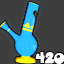
<style>
.page{position:relative;width:64px;height:64px;background:#3e3e3e}
.page>*{position:absolute;margin:0}
.t1{font:12px "akaDylanPlain";color:#ffffff}
</style>
<div class="page">
<p class="t1" style="left:35px;top:52px;width:30px;height:12px">420</p>
</div>
